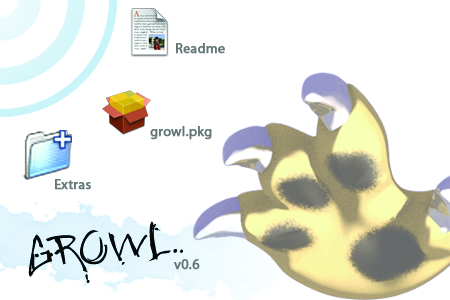
<style>
.page{position:relative;width:450px;height:300px;background:#ffffff}
.page>*{position:absolute;margin:0}
.t1{font:14px "Myriad-Roman";color:#757575;font-weight:bold}
.t2{font:14px "Myriad-Roman";color:#637777;font-weight:bold}
</style>
<div class="page">
<p class="t1" style="left:176px;top:43px;width:49px;height:11px">Readme</p>
<p class="t1" style="left:150px;top:126px;width:62px;height:14px">growl.pkg</p>
<p class="t1" style="left:55px;top:179px;width:36px;height:11px">Extras</p>
<p class="t2" style="left:174px;top:259px;width:26px;height:11px">v0.6</p>
</div>
